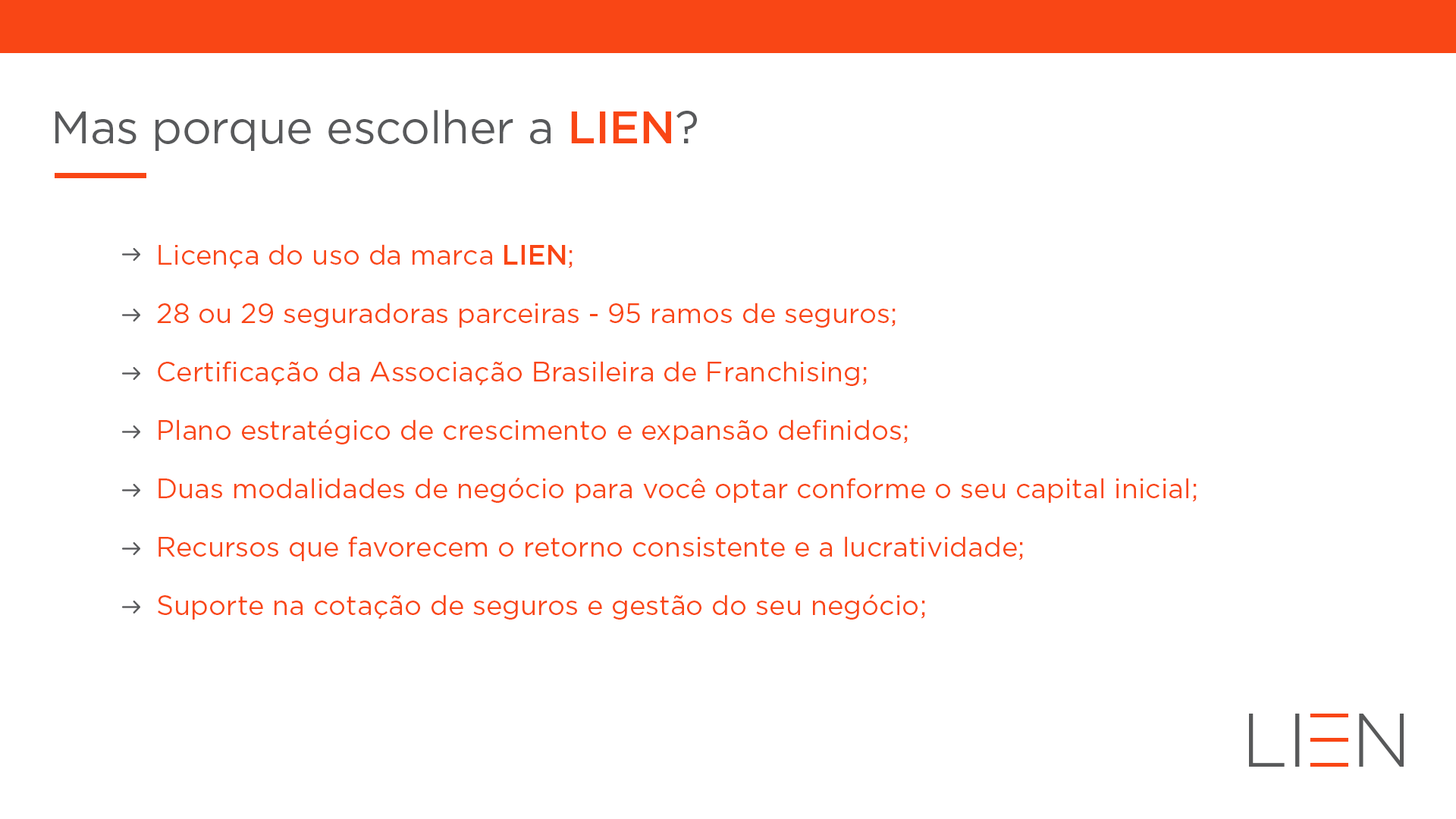
<style>
.page{position:relative;width:1456px;height:819px;background:#ffffff}
.page>*{position:absolute;margin:0}
.t1{font:45.5px "Gotham-Book";letter-spacing:-0.005em;color:#58595b}
.t2{font:45.5px "Gotham-Medium";letter-spacing:-0.005em;color:#f94615}
.t3{font:27.3px "Gotham-Book";color:#f94615}
.t4{font:27.3px "Gotham-Medium";color:#f94615}
</style>
<div class="page">
<p class="t1" style="left:55px;top:109px;width:642px;height:42px">Mas porque escolher a <span class="t2">LIEN</span>?</p>
<p class="t3" style="left:158px;top:244px;width:415px;height:25px">Licença do uso da marca <span class="t4">LIEN</span>;</p>
<p class="t3" style="left:157px;top:303px;width:739px;height:25px">28 ou 29 seguradoras parceiras - 95 ramos de seguros;</p>
<p class="t3" style="left:158px;top:361px;width:709px;height:25px">Certificação da Associação Brasileira de Franchising;</p>
<p class="t3" style="left:158px;top:419px;width:750px;height:25px">Plano estratégico de crescimento e expansão definidos;</p>
<p class="t3" style="left:158px;top:477px;width:1039px;height:26px">Duas modalidades de negócio para você optar conforme o seu capital inicial;</p>
<p class="t3" style="left:158px;top:536px;width:865px;height:25px">Recursos que favorecem o retorno consistente e a lucratividade;</p>
<p class="t3" style="left:158px;top:594px;width:767px;height:26px">Suporte na cotação de seguros e gestão do seu negócio;</p>
</div>
